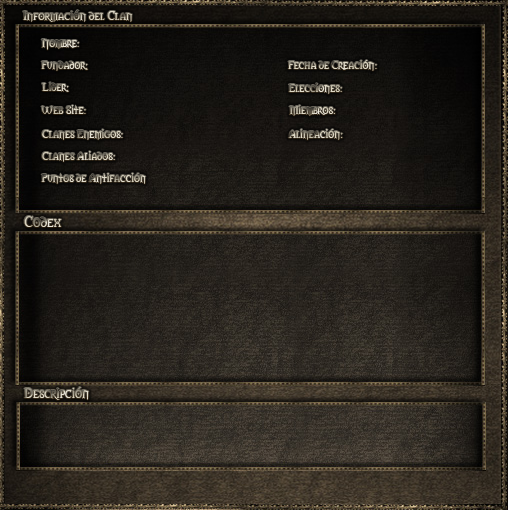
<style>
.page{position:relative;width:508px;height:510px}
.page>*{position:absolute;margin:0}
.t1{font:12px "Morpheus"}
.t2{font:11px "Morpheus"}
.t3{font:14px "Morpheus"}
.t4{font:13px "Morpheus"}
</style>
<div class="page">
<p class="t1" style="left:23px;top:10px;width:109px;height:12px">Información del Clan</p>
<p class="t2" style="left:41px;top:39px;width:38px;height:11px">Nombre:</p>
<p class="t2" style="left:41px;top:61px;width:47px;height:10px">Fundador:</p>
<p class="t2" style="left:288px;top:60px;width:89px;height:11px">Fecha de Creación:</p>
<p class="t2" style="left:42px;top:82px;width:27px;height:10px">Lider:</p>
<p class="t2" style="left:288px;top:83px;width:54px;height:11px">Elecciones:</p>
<p class="t2" style="left:41px;top:105px;width:45px;height:9px">Web Site:</p>
<p class="t2" style="left:289px;top:105px;width:47px;height:11px">Miembros:</p>
<p class="t2" style="left:42px;top:129px;width:81px;height:11px">Clanes Enemigos:</p>
<p class="t2" style="left:288px;top:129px;width:55px;height:11px">Alineación:</p>
<p class="t2" style="left:42px;top:151px;width:73px;height:11px">Clanes Aliados:</p>
<p class="t2" style="left:41px;top:173px;width:105px;height:11px">Puntos de Antifacción</p>
<p class="t3" style="left:24px;top:216px;width:38px;height:11px">Codex</p>
<p class="t4" style="left:24px;top:387px;width:65px;height:13px">Descripción</p>
</div>
